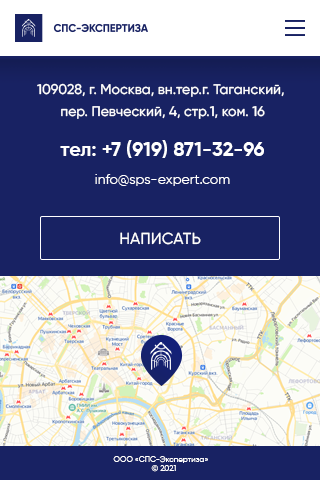
<style>
.page{position:relative;width:320px;height:480px;background:#182263}
.page>*{position:absolute;margin:0}
.t1{font:14px/22px "Gilroy-Medium";color:#ffffff}
.t2{font:14px/20px "Gilroy-Medium";color:#ffffff}
.t3{font:14px/16px "Gilroy-Medium";color:#ffffff}
.t4{font:20px/40px "Gilroy-Bold";color:#ffffff}
.t5{font:20px/28px "Gilroy-Bold";color:#ffffff}
.t6{font:14px/28px "Gilroy-Regular";color:#ffffff}
.t7{font:16px "Gilroy-Medium";color:#ffffff;text-transform:uppercase}
.t8{font:8px "Gilroy-Regular";color:#ffffff}
</style>
<div class="page">
<p class="t1" style="left:37px;top:83px;width:247px;height:103px;text-align:center"><span class="t2">1</span><span class="t3">09028, г. Москва, вн.тер.г. Таган</span>ский, <br>пер. Певческий, 4, стр.1, ком. 16<br><span class="t4">тел: +7 (919) 8</span><span class="t5">71-32-96<br></span><span class="t6">info@sps-expert.com</span></p>
<p class="t7" style="left:120px;top:232px;width:81px;height:13px">написать</p>
<p class="t8" style="left:113px;top:456px;width:95px;height:16px;text-align:center">ООО «СПС-Экспертиза»   <br>© 2021</p>
</div>
